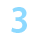
<style>
.page{position:relative;width:40px;height:40px;background:#ffffff}
.page>*{position:absolute;margin:0}
.t1{font:40px "MyriadPro-Semibold";letter-spacing:-0.075em;color:#8dd9ff;scale:0.9 1}
</style>
<div class="page">
<p class="t1" style="left:11px;top:7px;width:16px;height:26px">3</p>
</div>
